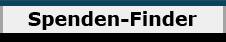
<style>
.page{position:relative;width:226px;height:42px;background:#efefef}
.page>*{position:absolute;margin:0}
.t1{font:19px "Verdana-Bold";color:#000000}
</style>
<div class="page">
<p class="t1" style="left:28px;top:11px;width:169px;height:19px">Spenden-Finder</p>
</div>
